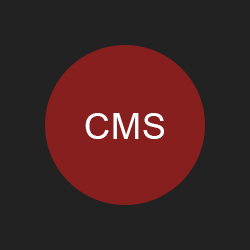
<style>
.page{position:relative;width:250px;height:250px;background:#222222}
.page>*{position:absolute;margin:0}
.t1{font:36px "ArialMT";letter-spacing:0.025em;color:#ffffff}
</style>
<div class="page">
<p class="t1" style="left:85px;top:113px;width:79px;height:26px">CMS</p>
</div>
